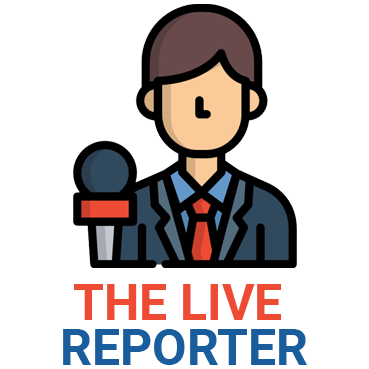
<style>
.page{position:relative;width:369px;height:369px;background:#ffffff}
.page>*{position:absolute;margin:0}
.t1{font:50px/44.7px "Roboto-Bold";color:#ee4b34;text-transform:uppercase}
.t2{font:50px/44.7px "Roboto-Bold";color:#1a5d9d;text-transform:uppercase}
</style>
<div class="page">
<p class="t1" style="left:63px;top:284px;width:244px;height:81px;text-align:center">THE LIVE <br><span class="t2">REPORTER</span></p>
</div>
